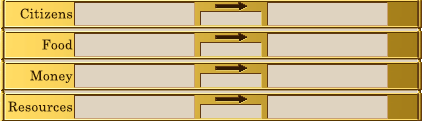
<style>
.page{position:relative;width:424px;height:121px;background:#dfd3c0}
.page>*{position:absolute;margin:0}
.t1{font:13.3px "CenturySchoolbook";letter-spacing:0.025em;color:#321a02}
</style>
<div class="page">
<p class="t1" style="left:20px;top:8px;width:53px;height:11px">Citizens</p>
<p class="t1" style="left:42px;top:39px;width:31px;height:11px">Food</p>
<p class="t1" style="left:30px;top:70px;width:43px;height:13px">Money</p>
<p class="t1" style="left:8px;top:101px;width:65px;height:11px">Resources</p>
</div>
